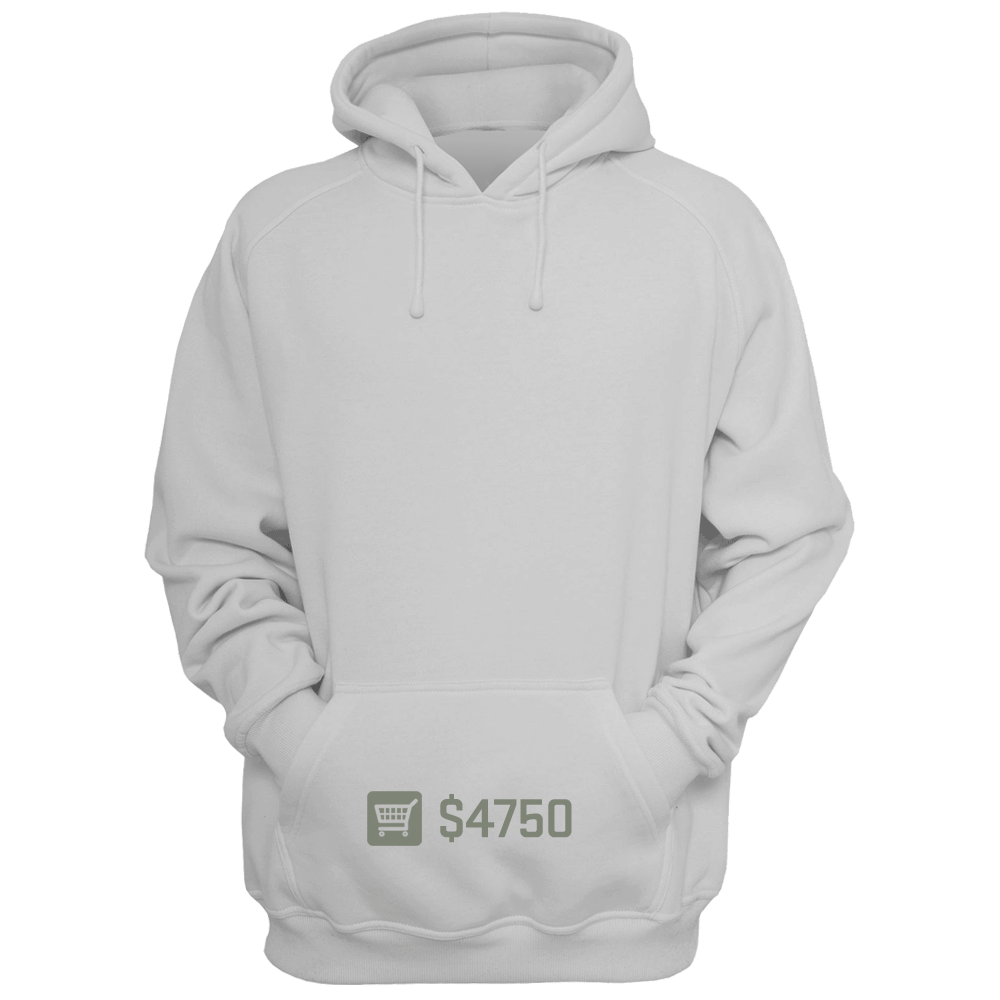
<style>
.page{position:relative;width:1000px;height:1000px;background:#ffffff}
.page>*{position:absolute;margin:0}
.t1{font:56px "Stratum2-Medium";letter-spacing:-0.05em;color:#7e8575;font-weight:bold}
</style>
<div class="page">
<p class="t1" style="left:440px;top:794px;width:132px;height:49px">$4750</p>
</div>
